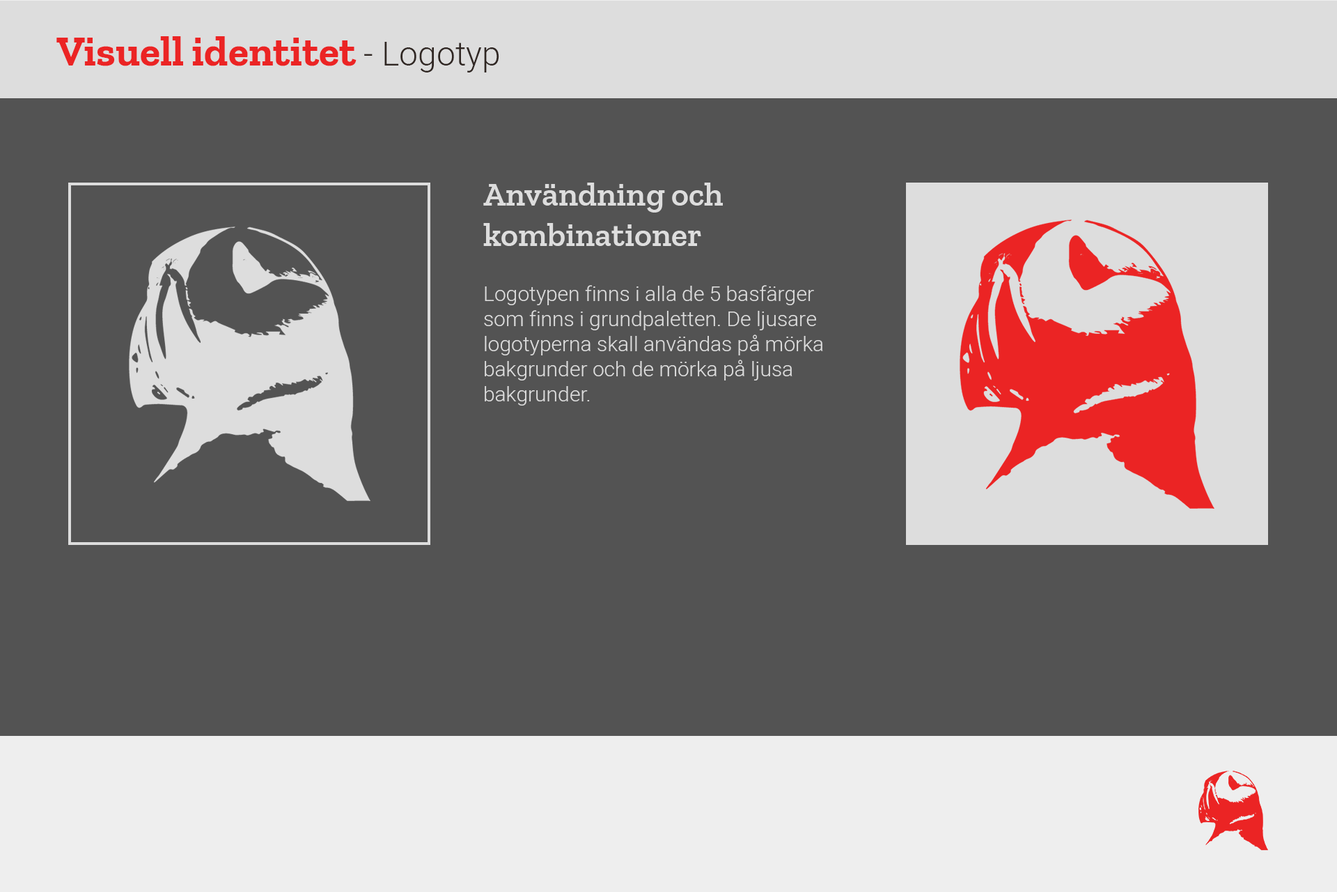
<style>
.page{position:relative;width:1337px;height:892px;background:#535353}
.page>*{position:absolute;margin:0}
.t1{font:41.8px "ZillaSlab-Bold";color:#eb2424}
.t2{font:33.4px "Heebo-Light";color:#302723}
.t3{font:20.9px "Heebo-Light";color:#dddddd}
.t4{font:33.4px "ZillaSlab-SemiBold";color:#dddddd}
</style>
<div class="page">
<p class="t1" style="left:56px;top:36px;width:443px;height:36px">Visuell identitet<span class="t2"> - Logotyp</span></p>
<p class="t3" style="left:483px;top:182px;width:340px;height:223px"><span class="t4">Användning och kombinationer<br><br></span>Logotypen finns i alla de 5 basfärger som finns i grundpaletten. De ljusare logotyperna skall användas på mörka bakgrunder och de mörka på ljusa bakgrunder.</p>
</div>
